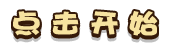
<style>
.page{position:relative;width:171px;height:50px;background:#ffffff}
.page>*{position:absolute;margin:0}
.t1{font:27px "DFPHaiBaoW12";letter-spacing:0.3em;color:#f7e3a0;scale:1.11 1}
</style>
<div class="page">
<p class="t1" style="left:13px;top:11px;width:145px;height:25px">点击开始</p>
</div>
